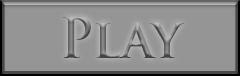
<style>
.page{position:relative;width:240px;height:76px;background:#959595}
.page>*{position:absolute;margin:0}
.t1{font:54.3px "TrajanPro-Bold";scale:0.93 1}
</style>
<div class="page">
<p class="t1" style="left:63px;top:17px;width:122px;height:41px">Play</p>
</div>
